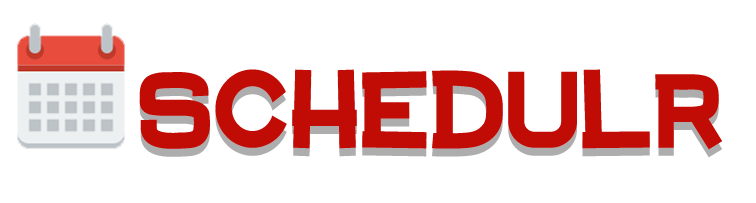
<style>
.page{position:relative;width:756px;height:203px;background:#ffffff}
.page>*{position:absolute;margin:0}
.t1{font:100px "Aventura-Bold";color:#c10c06}
</style>
<div class="page">
<p class="t1" style="left:139px;top:69px;width:583px;height:81px">SCHEDULR</p>
</div>
